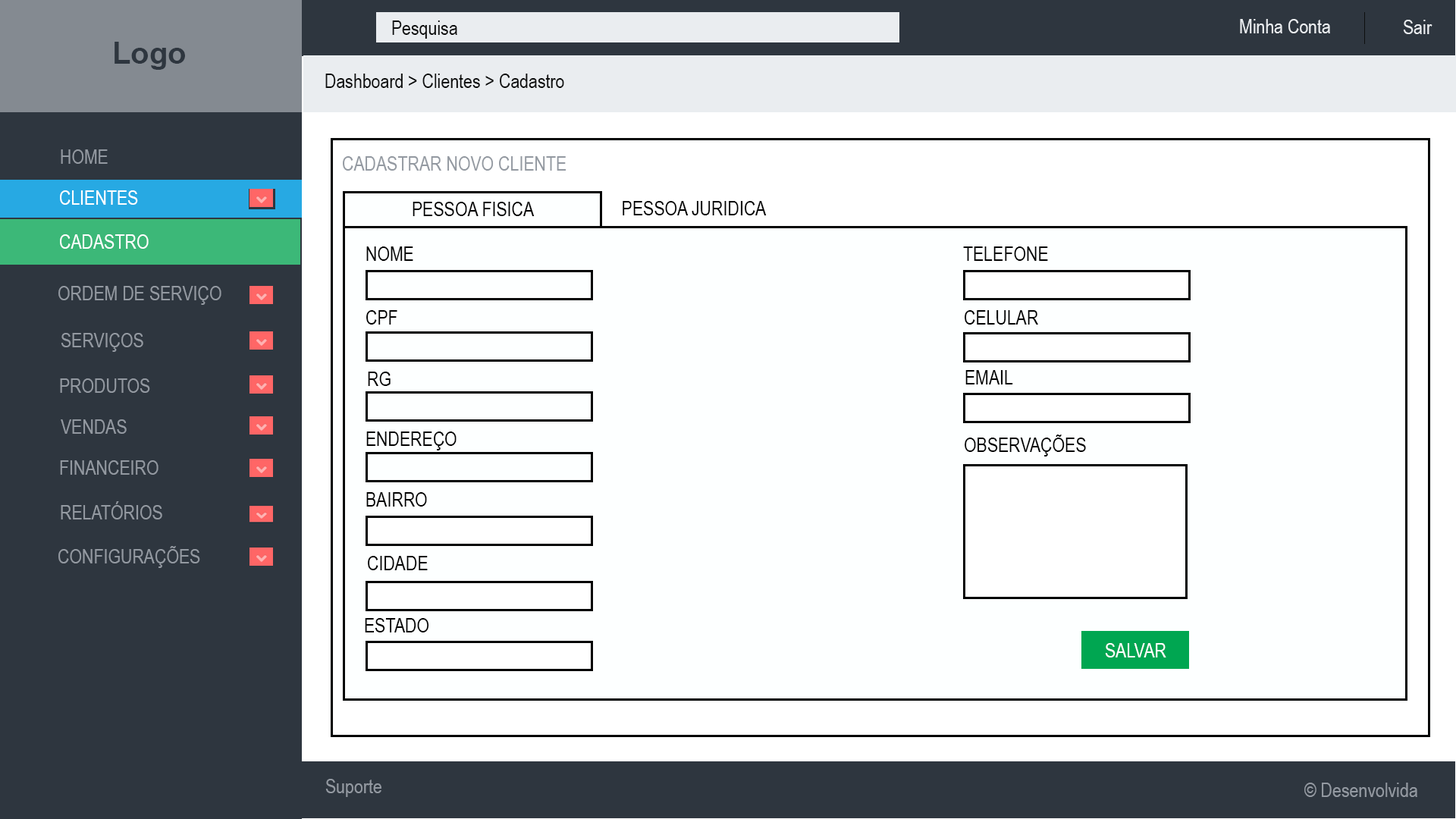
<style>
.page{position:relative;width:1456px;height:819px;background:#fdffff}
.page>*{position:absolute;margin:0}
.t1{font:19.7px "ArialNarrow";color:#0e0f0f}
.t2{font:19.7px "ArialNarrow";color:#eaedf0}
.t3{font:30.3px "Arial-BoldMT";color:#2e363f}
.t4{font:19.7px "ArialNarrow";color:#9399a1}
.t5{font:19.7px "ArialNarrow";color:#ffffff}
.t6{font:19.7px "ArialNarrow";color:#000000}
</style>
<div class="page">
<p class="t1" style="left:392px;top:20px;width:65px;height:19px">Pesquisa</p>
<p class="t2" style="left:1240px;top:19px;width:90px;height:14px">Minha Conta</p>
<p class="t2" style="left:1403px;top:20px;width:29px;height:14px">Sair</p>
<p class="t3" style="left:115px;top:42px;width:70px;height:28px">Logo</p>
<p class="t1" style="left:325px;top:74px;width:239px;height:14px">Dashboard &gt; Clientes &gt; Cadastro</p>
<p class="t4" style="left:61px;top:149px;width:47px;height:15px">HOME</p>
<p class="t4" style="left:343px;top:156px;width:223px;height:15px">CADASTRAR NOVO CLIENTE</p>
<p class="t5" style="left:60px;top:190px;width:78px;height:15px">CLIENTES</p>
<p class="t6" style="left:413px;top:202px;width:122px;height:14px">PESSOA FISICA</p>
<p class="t6" style="left:623px;top:201px;width:144px;height:14px">PESSOA JURIDICA</p>
<p class="t5" style="left:60px;top:234px;width:89px;height:15px">CADASTRO</p>
<p class="t6" style="left:366px;top:246px;width:47px;height:15px">NOME</p>
<p class="t6" style="left:963px;top:246px;width:85px;height:15px">TELEFONE</p>
<p class="t4" style="left:58px;top:286px;width:163px;height:19px">ORDEM DE SERVIÇO</p>
<p class="t6" style="left:366px;top:310px;width:31px;height:15px">CPF</p>
<p class="t6" style="left:965px;top:310px;width:73px;height:15px">CELULAR</p>
<p class="t4" style="left:61px;top:333px;width:82px;height:19px">SERVIÇOS</p>
<p class="t6" style="left:368px;top:372px;width:23px;height:14px">RG</p>
<p class="t6" style="left:965px;top:370px;width:48px;height:14px">EMAIL</p>
<p class="t4" style="left:60px;top:378px;width:90px;height:15px">PRODUTOS</p>
<p class="t4" style="left:61px;top:419px;width:66px;height:15px">VENDAS</p>
<p class="t6" style="left:366px;top:431px;width:91px;height:19px">ENDEREÇO</p>
<p class="t6" style="left:965px;top:435px;width:121px;height:22px">OBSERVAÇÕES</p>
<p class="t4" style="left:60px;top:460px;width:98px;height:15px">FINANCEIRO</p>
<p class="t6" style="left:366px;top:492px;width:61px;height:15px">BAIRRO</p>
<p class="t4" style="left:61px;top:501px;width:101px;height:18px">RELATÓRIOS</p>
<p class="t4" style="left:58px;top:546px;width:142px;height:22px">CONFIGURAÇÕES</p>
<p class="t6" style="left:368px;top:556px;width:60px;height:14px">CIDADE</p>
<p class="t6" style="left:365px;top:618px;width:64px;height:14px">ESTADO</p>
<p class="t5" style="left:1105px;top:643px;width:61px;height:14px">SALVAR</p>
<p class="t4" style="left:325px;top:779px;width:56px;height:18px">Suporte</p>
<p class="t4" style="left:1304px;top:783px;width:113px;height:14px">© Desenvolvida</p>
</div>
